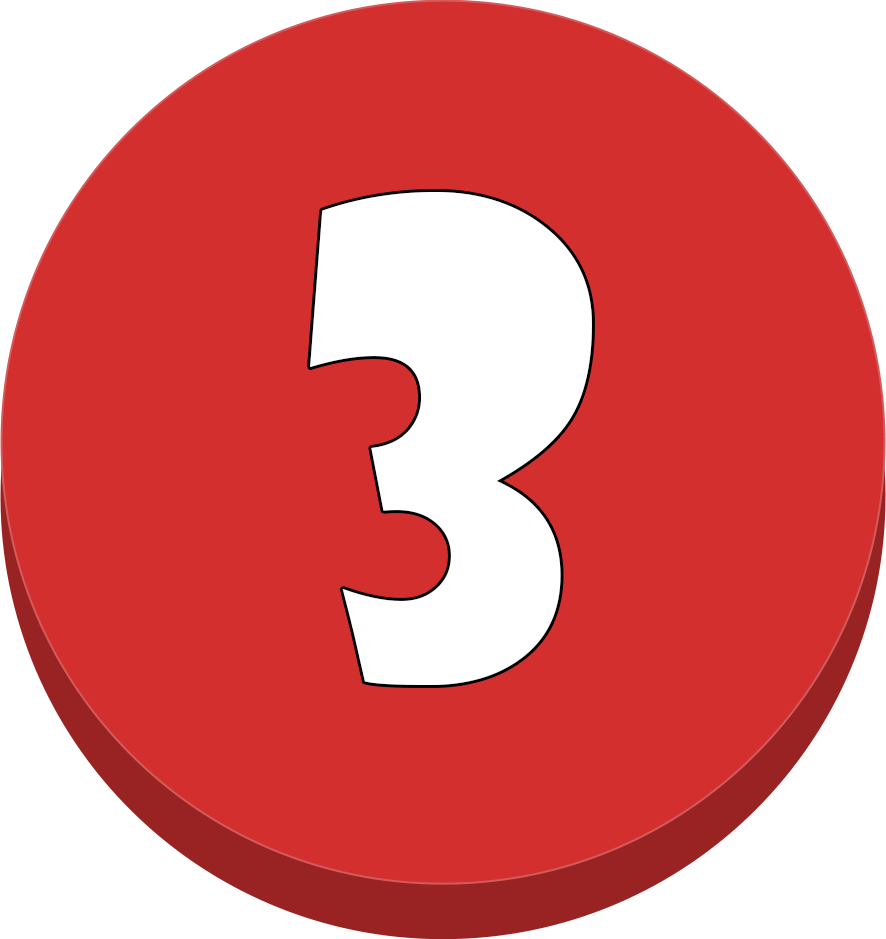
<style>
.page{position:relative;width:886px;height:939px;background:#d32f2f}
.page>*{position:absolute;margin:0}
.t1{font:637.2px "ShowcardGothic-Reg";color:#ffffff}
</style>
<div class="page">
<p class="t1" style="left:310px;top:192px;width:282px;height:493px">3</p>
</div>
